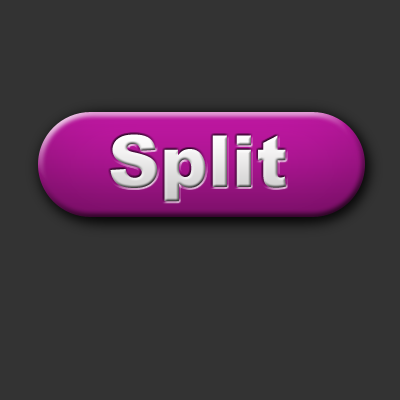
<style>
.page{position:relative;width:400px;height:400px;background:#333333}
.page>*{position:absolute;margin:0}
.t1{font:72px "Arial-Black"}
</style>
<div class="page">
<p class="t1" style="left:110px;top:134px;width:176px;height:68px">Split</p>
</div>
